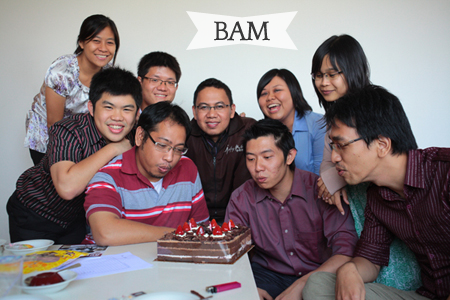
<style>
.page{position:relative;width:450px;height:300px}
.page>*{position:absolute;margin:0}
.t1{font:27.8px "Quattrocento";letter-spacing:-0.075em;color:#383838;font-weight:bold}
</style>
<div class="page">
<p class="t1" style="left:214px;top:21px;width:56px;height:20px">BAM</p>
</div>
